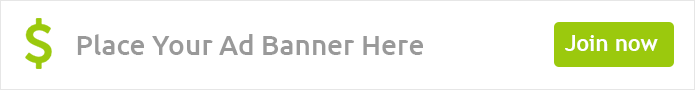
<style>
.page{position:relative;width:695px;height:90px;background:#ffffff}
.page>*{position:absolute;margin:0}
.t1{font:28px "Ubuntu-Medium";color:#999999}
.t2{font:22px "TrebuchetMS-Bold";color:#ffffff}
</style>
<div class="page">
<p class="t1" style="left:77px;top:34px;width:346px;height:21px">Place Your Ad Banner Here</p>
<p class="t2" style="left:565px;top:35px;width:93px;height:16px">Join now</p>
</div>
